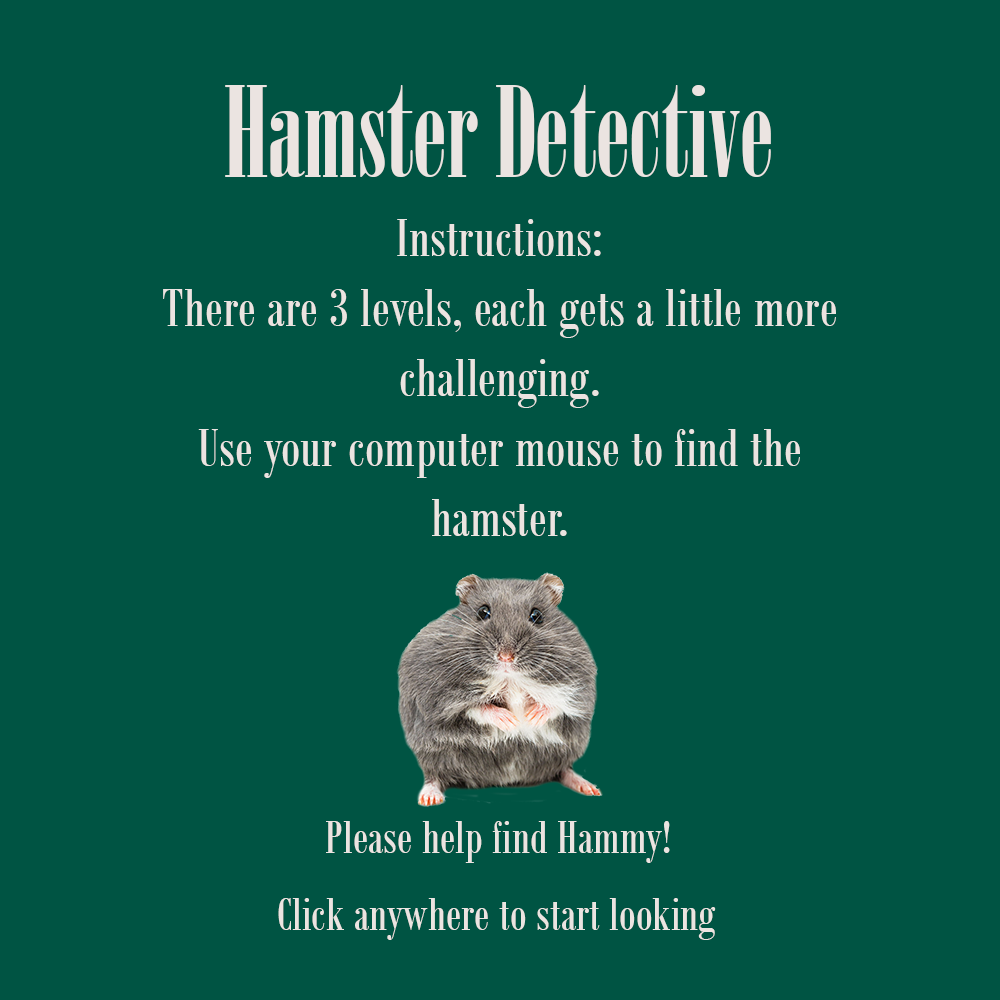
<style>
.page{position:relative;width:1000px;height:1000px;background:#005443}
.page>*{position:absolute;margin:0}
.t1{font:125px "BodoniMTPosterCompressed";color:#ebe4e1}
.t2{font:58.3px "BodoniMTCondensed";color:#ebe4e1}
.t3{font:50px "BodoniMTCondensed";color:#ebe4e1}
</style>
<div class="page">
<p class="t1" style="left:225px;top:85px;width:546px;height:92px">Hamster Detective</p>
<p class="t2" style="left:163px;top:219px;width:673px;height:317px;text-align:center">Instructions:<br>There are 3 levels, each gets a little more challenging. <br>Use your computer mouse to find the hamster.</p>
<p class="t3" style="left:326px;top:821px;width:344px;height:42px">Please help find Hammy!</p>
<p class="t3" style="left:278px;top:898px;width:438px;height:42px">Click anywhere to start looking</p>
</div>
